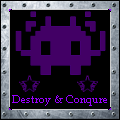
<style>
.page{position:relative;width:120px;height:120px;background:#000000}
.page>*{position:absolute;margin:0}
.t1{font:10.7px "BookAntiqua";color:#9900ff}
</style>
<div class="page">
<p class="t1" style="left:12px;top:95px;width:95px;height:11px">Destroy &amp; Conqure</p>
</div>
